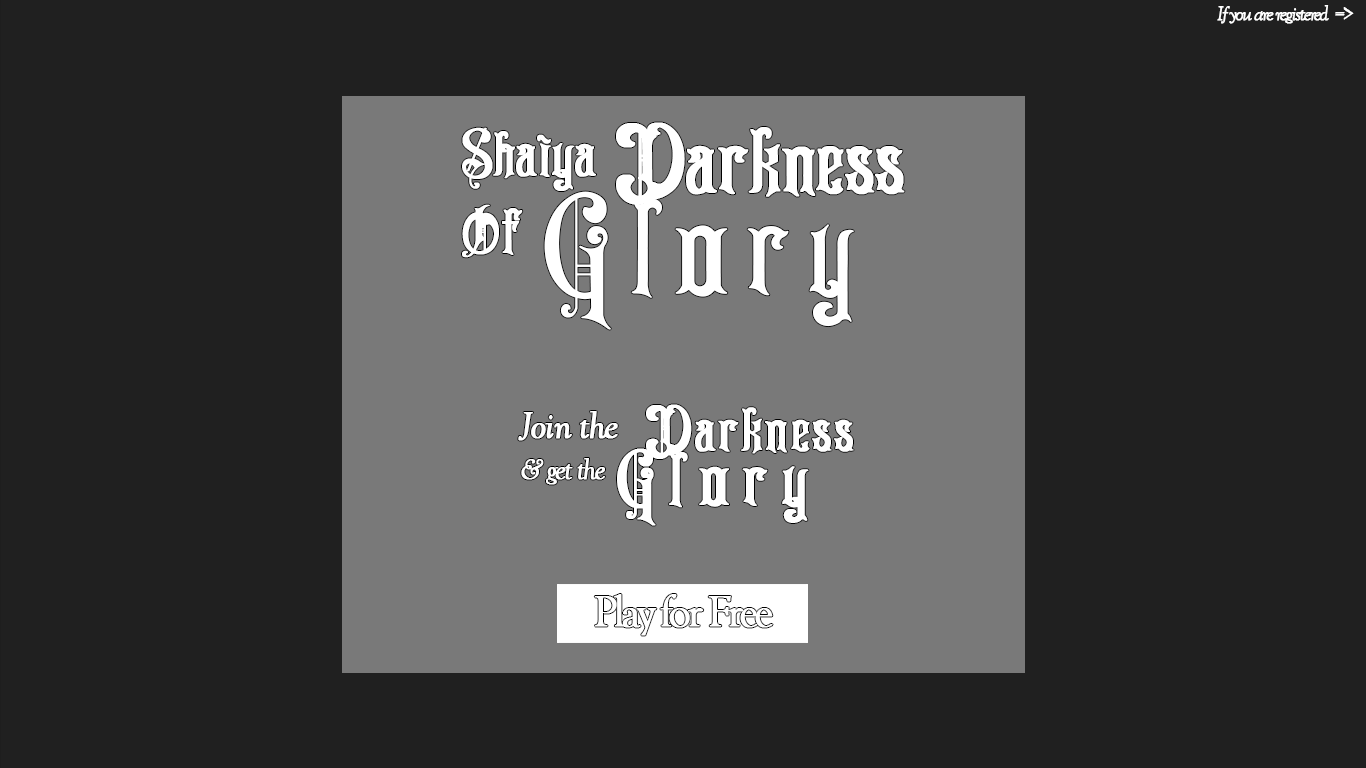
<style>
.page{position:relative;width:1366px;height:768px;background:#202020}
.page>*{position:absolute;margin:0}
.t1{font:35.7px "GoudyOldStyleT-Italic";letter-spacing:-0.1em;color:#ffffff;font-weight:bold}
.t2{font:161.8px/172.9px "Darkpower";color:#ffffff;font-weight:bold}
.t3{font:110.1px "Darkpower";color:#ffffff;font-weight:bold}
.t4{font:110.1px/77.1px "Darkpower";letter-spacing:0.04em;color:#ffffff;font-weight:bold}
.t5{font:234.5px/77.1px "Darkpower";letter-spacing:0.12em;color:#ffffff;font-weight:bold}
.t6{font:50.9px/46.9px "GoudyOldStyleT-Italic";letter-spacing:-0.08em;color:#ffffff;font-weight:bold}
.t7{font:66.9px/46.9px "GoudyOldStyleT-Italic";letter-spacing:-0.06em;color:#ffffff;font-weight:bold}
.t8{font:107.1px/42.9px "Darkpower";letter-spacing:0.04em;color:#ffffff;font-weight:bold}
.t9{font:129.9px/0px "Darkpower";letter-spacing:0.18em;color:#ffffff;font-weight:bold}
</style>
<div class="page">
<p class="t1" style="left:1217px;top:5px;width:137px;height:19px">If you are registered  =&gt;</p>
<p class="t2" style="left:462px;top:122px;width:443px;height:208px"><span class="t3">Shaiya </span>Darkness<br><span class="t4">Of </span><span class="t5">Glory</span></p>
<p class="t6" style="left:518px;top:404px;width:336px;height:122px"><span class="t7">Join the   </span><span class="t8">Darkness<br></span>&amp; get the <span class="t9">Glory</span></p>
</div>
